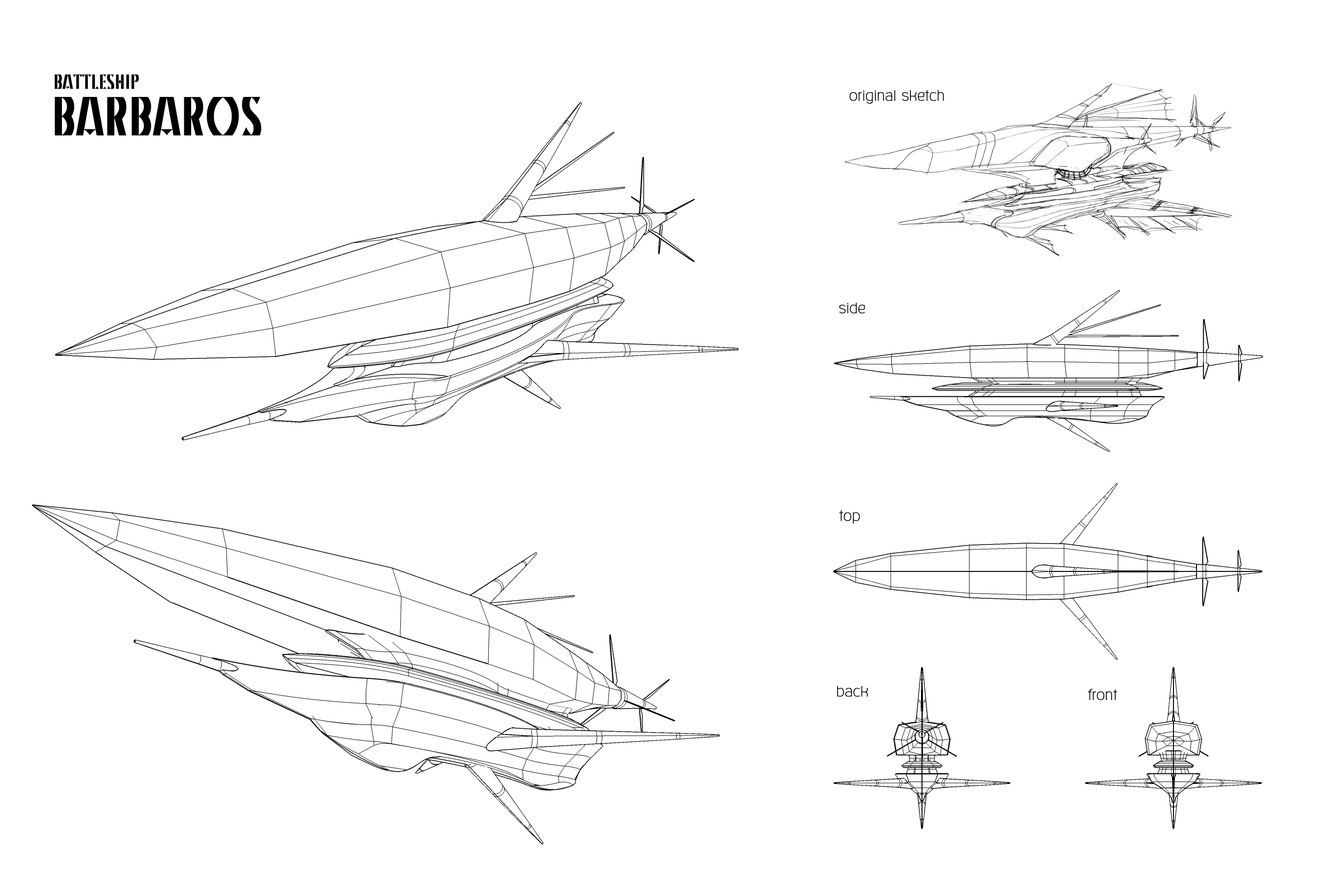
<style>
.page{position:relative;width:1340px;height:890px;background:#ffffff}
.page>*{position:absolute;margin:0}
.t1{font:20.5px "KinoMT";color:#000000}
.t2{font:54.7px "KinoMT";color:#000000}
.t3{font:19.7px "Kunlasatri";color:#000000}
</style>
<div class="page">
<p class="t1" style="left:55px;top:74px;width:84px;height:15px">BATTLESHIP</p>
<p class="t2" style="left:55px;top:97px;width:207px;height:39px">BARBAROS</p>
<p class="t3" style="left:849px;top:90px;width:95px;height:14px">original sketch</p>
<p class="t3" style="left:839px;top:303px;width:26px;height:11px">side</p>
<p class="t3" style="left:839px;top:510px;width:21px;height:14px">top</p>
<p class="t3" style="left:837px;top:686px;width:31px;height:11px">back</p>
<p class="t3" style="left:1087px;top:689px;width:30px;height:12px">front</p>
</div>
